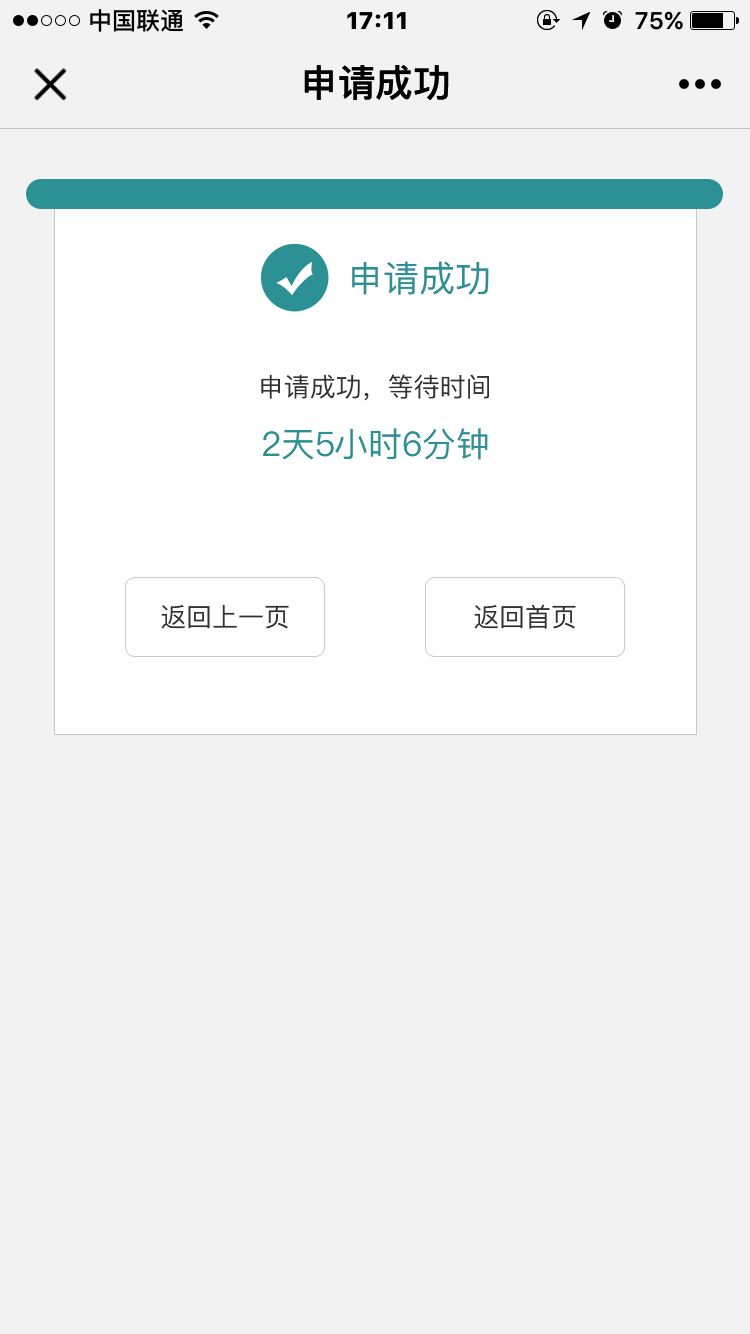
<style>
.page{position:relative;width:750px;height:1334px;background:#f2f2f2}
.page>*{position:absolute;margin:0}
.t1{font:36px "PingFang-SC-Medium";color:#2c9195}
.t2{font:26px "PingFang-SC-Medium";color:#323232}
.t3{font:34px "PingFang-SC-Medium";color:#2c9195}
</style>
<div class="page">
<p class="t1" style="left:352px;top:261px;width:137px;height:34px">申请成功</p>
<p class="t2" style="left:261px;top:374px;width:228px;height:27px">申请成功，等待时间</p>
<p class="t3" style="left:263px;top:428px;width:225px;height:32px">2天5小时6分钟</p>
<p class="t2" style="left:161px;top:604px;width:128px;height:25px">返回上一页</p>
<p class="t2" style="left:474px;top:604px;width:102px;height:25px">返回首页</p>
</div>
